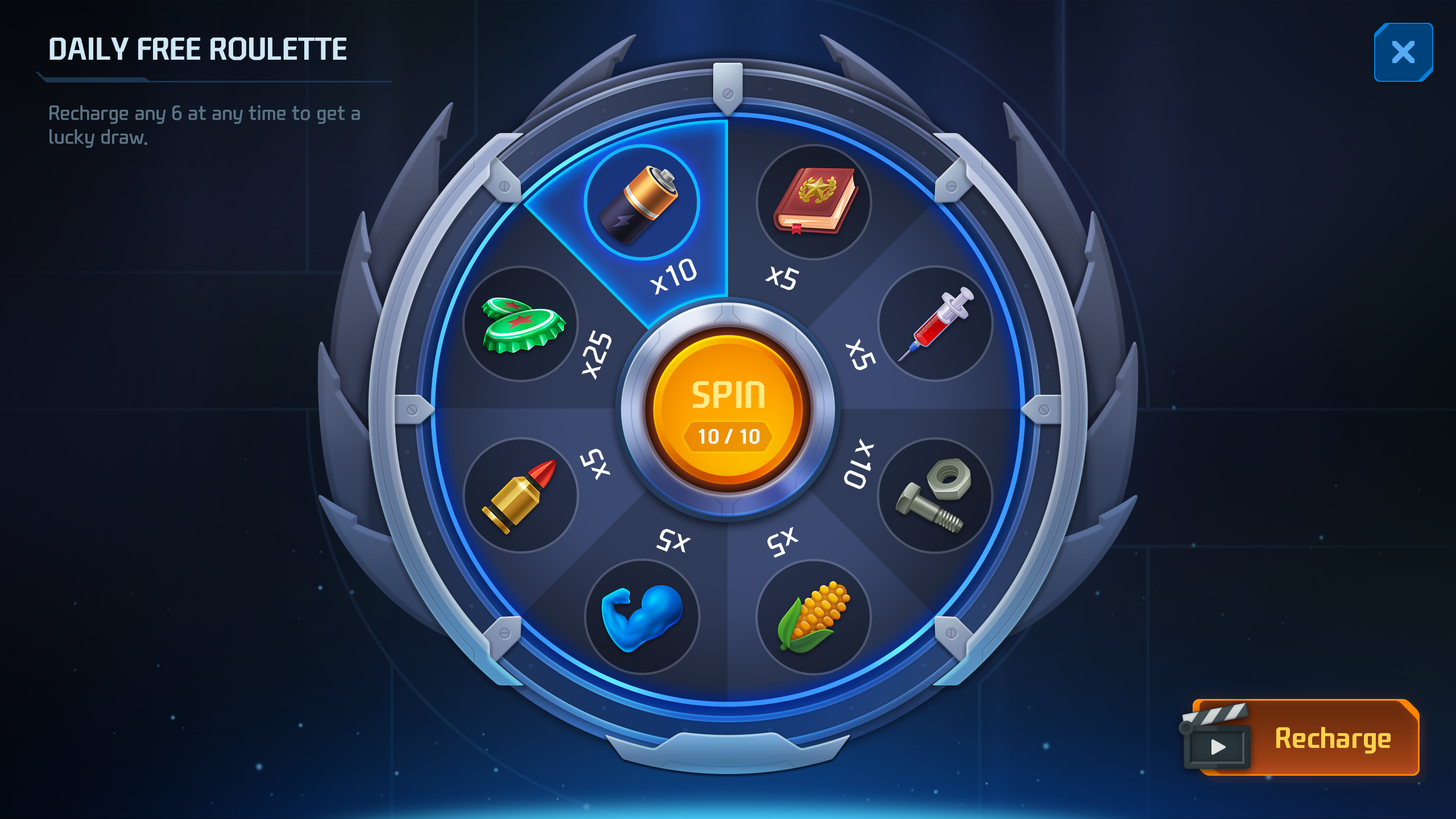
<style>
.page{position:relative;width:1456px;height:819px}
.page>*{position:absolute;margin:0}
.t1{font:30.6px "NEXONFootballGothicB";color:#cfe7f7}
.t2{font:19.9px "NEXONFootballGothicL";color:#597585}
.t3{font:29.5px "NEXONFootballGothicL";color:#ffffff}
.t4{font:36.7px "NEXONFootballGothicB";color:#ffec86;text-transform:uppercase}
.t5{font:19.9px "NEXONFootballGothicB";color:#ffffff;text-transform:uppercase}
.t6{font:28.4px "NEXONFootballGothicB";color:#ffd24a}
</style>
<div class="page">
<p class="t1" style="left:49px;top:37px;width:297px;height:23px">DAILY FREE ROULETTE</p>
<p class="t2" style="left:49px;top:105px;width:311px;height:43px">Recharge any 6 at any time to get a <br>lucky draw.</p>
<p class="t3" style="left:650px;top:258px;width:47px;height:37px;rotate:-23deg">x10</p>
<p class="t3" style="left:765px;top:266px;width:35px;height:24px;rotate:23deg">x5</p>
<p class="t3" style="left:581px;top:330px;width:31px;height:50px;rotate:-68deg">x25</p>
<p class="t3" style="left:845px;top:338px;width:31px;height:32px;rotate:68deg">x5</p>
<p class="t4" style="left:693px;top:381px;width:71px;height:27px">spin</p>
<p class="t5" style="left:699px;top:429px;width:61px;height:15px">10 / 10</p>
<p class="t3" style="left:580px;top:449px;width:31px;height:32px;rotate:-112deg">x5</p>
<p class="t3" style="left:844px;top:439px;width:30px;height:50px;rotate:112deg">x10</p>
<p class="t3" style="left:656px;top:529px;width:35px;height:24px;rotate:-157deg">x5</p>
<p class="t3" style="left:767px;top:527px;width:32px;height:31px;rotate:157deg">x5</p>
<p class="t6" style="left:1276px;top:727px;width:115px;height:27px">Recharge</p>
</div>
